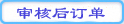
<style>
.page{position:relative;width:124px;height:24px}
.page>*{position:absolute;margin:0}
.t1{font:18px "LiSu";color:#4744da}
</style>
<div class="page">
<p class="t1" style="left:17px;top:7px;width:88px;height:12px">审核后订单</p>
</div>
